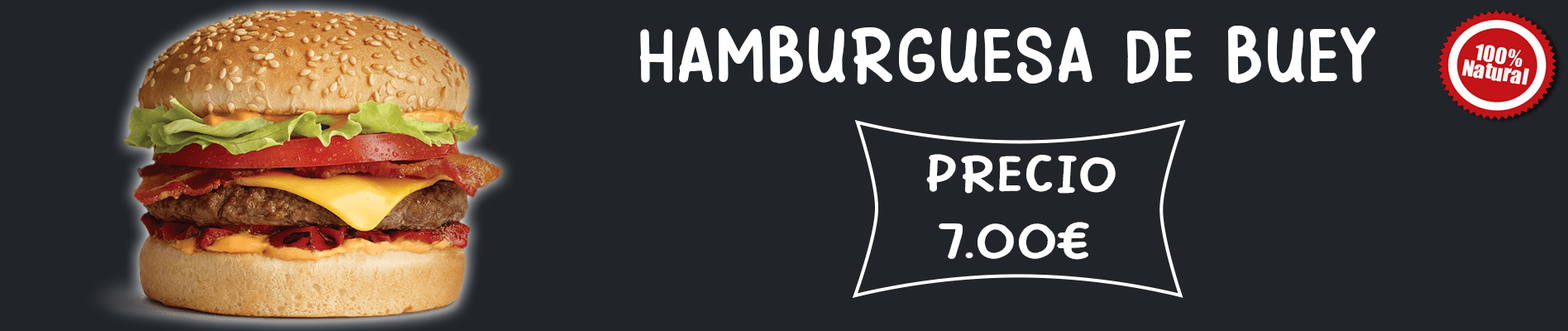
<style>
.page{position:relative;width:1568px;height:331px;background:#212529}
.page>*{position:absolute;margin:0}
.t1{font:82.7px "PinkChicken-Regular";color:#ffffff}
.t2{font:55.1px "PinkChicken-Regular";color:#ffffff;scale:1.23 1}
</style>
<div class="page">
<p class="t1" style="left:640px;top:26px;width:735px;height:58px">HAMBURGUESA DE BUEY</p>
<p class="t2" style="left:926px;top:154px;width:190px;height:106px;text-align:center">PRECIO<br>7.00€</p>
</div>
